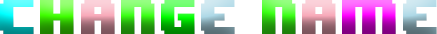
<style>
.page{position:relative;width:437px;height:34px;background:#ffffff}
.page>*{position:absolute;margin:0}
.t1{font:40.2px "8BITWONDERNominal"}
</style>
<div class="page">
<p class="t1" style="left:0px;top:0px;width:437px;height:34px">change name</p>
<p class="t1" style="left:0px;top:0px;width:437px;height:34px">change name</p>
</div>
